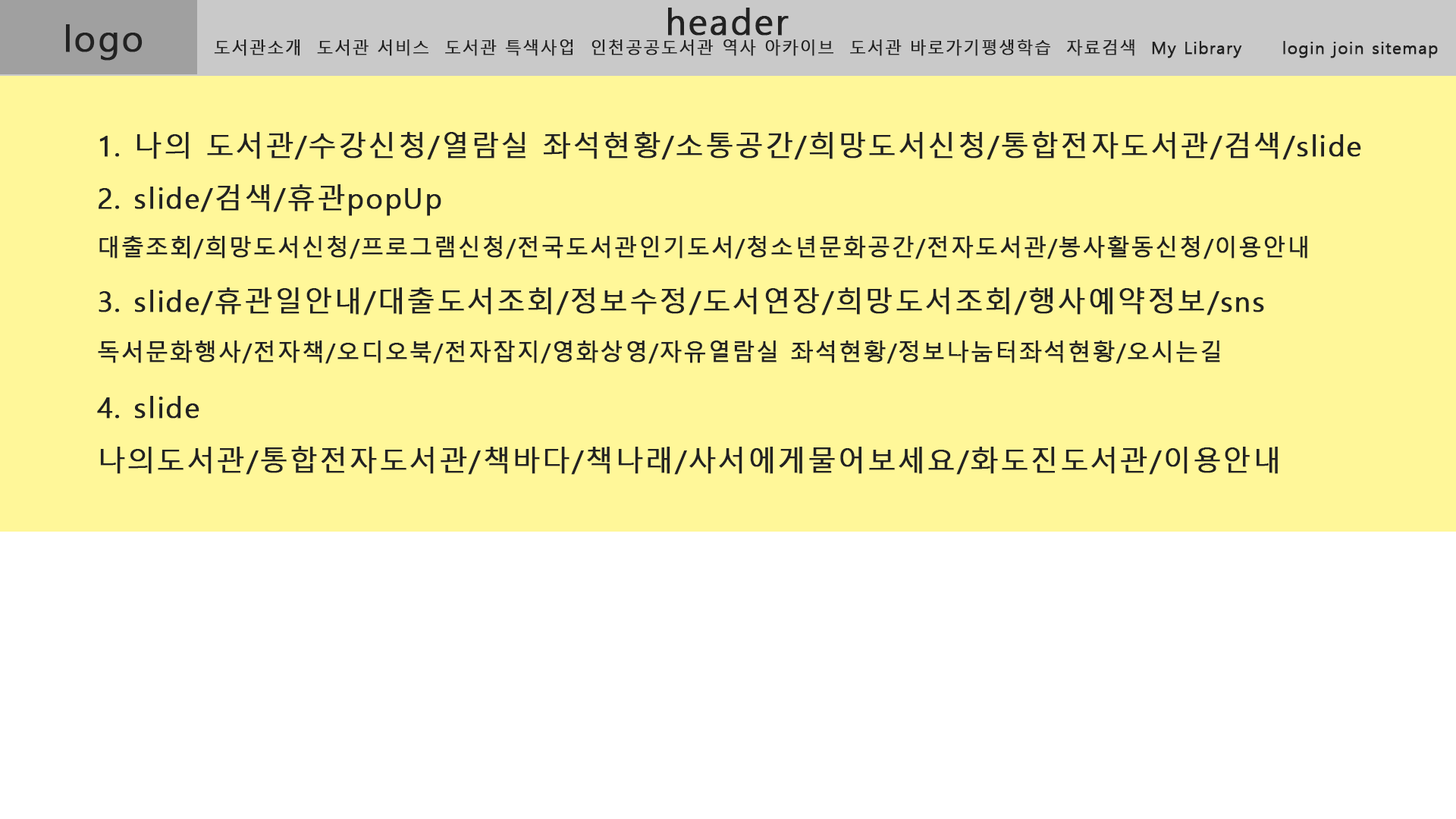
<style>
.page{position:relative;width:1456px;height:819px;background:#fff799}
.page>*{position:absolute;margin:0}
.t1{font:35.6px "MalgunGothic";letter-spacing:0.04em;color:#222222;font-weight:bold}
.t2{font:16.7px "MalgunGothic";letter-spacing:0.04em;color:#222222;font-weight:bold}
.t3{font:28.1px/53.1px "MalgunGothic";letter-spacing:0.04em;color:#222222;font-weight:bold}
.t4{font:28.1px/13.6px "MalgunGothic";letter-spacing:0.04em;color:#222222;font-weight:bold}
.t5{font:28.1px/51.6px "MalgunGothic";letter-spacing:0.04em;color:#222222;font-weight:bold}
.t6{font:22.7px/51.6px "MalgunGothic";letter-spacing:0.04em;color:#222222;font-weight:bold}
.t7{font:22.7px/13.6px "MalgunGothic";letter-spacing:0.04em;color:#222222;font-weight:bold}
.t8{font:22.7px/53.1px "MalgunGothic";letter-spacing:0.04em;color:#222222;font-weight:bold}
</style>
<div class="page">
<p class="t1" style="left:668px;top:8px;width:121px;height:28px">header</p>
<p class="t1" style="left:66px;top:24px;width:77px;height:37px">logo</p>
<p class="t2" style="left:214px;top:39px;width:1028px;height:19px">도서관소개  도서관 서비스  도서관 특색사업  인천공공도서관 역사 아카이브  도서관 바로가기평생학습  자료검색  My Library</p>
<p class="t2" style="left:1283px;top:41px;width:155px;height:17px">login join sitemap</p>
<p class="t3" style="left:97px;top:131px;width:1264px;height:344px">1. 나의 도서관/수강신청/열람실 좌석현황/소통공간/희망도서신청/통합전자도서관/검색/slide<br><span class="t4">2. slide/검</span><span class="t5">색/휴관popUp<br></span><span class="t6">대출조회/희망</span><span class="t7">도서신청/프로그램신청/전국도서관인기도서/청소년문화공간/전자도서관/봉사활동신청/이용안내<br></span>3. slide/휴관일안내/대출도서조회/정보수정/도서연장/희망도서조회/행사예약정보/sns<br><span class="t8">독서문화행사/전자책/오디오북/전자잡지/영화상영/자유열람실 좌석현황/정보나눔터좌석현황/오시는길<br></span>4. slide<br>나의도서관/통합전자도서관/책바다/책나래/사서에게물어보세요/화도진도서관/이용안내</p>
</div>
